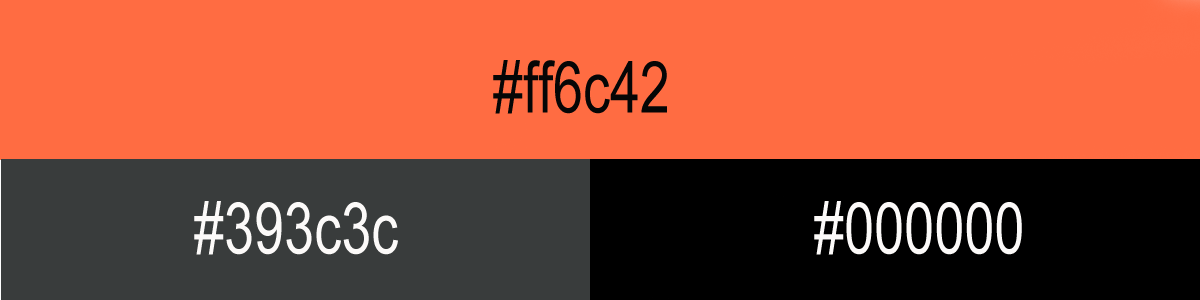
<style>
.page{position:relative;width:1200px;height:300px;background:#ff6c42}
.page>*{position:absolute;margin:0}
.t1{font:72px "ArialMT";color:#060606;scale:0.75 1}
.t2{font:72px "ArialMT";color:#fcfaf9;scale:0.75 1}
</style>
<div class="page">
<p class="t1" style="left:493px;top:60px;width:174px;height:54px">#ff6c42</p>
<p class="t2" style="left:194px;top:201px;width:204px;height:54px">#393c3c</p>
<p class="t2" style="left:814px;top:201px;width:208px;height:54px">#00000000000000</p>
</div>
